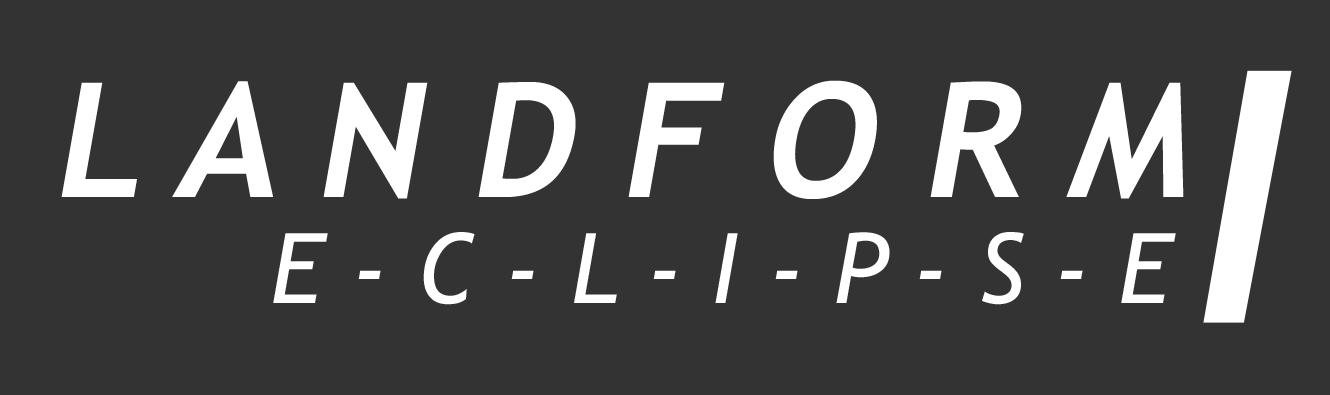
<style>
.page{position:relative;width:1330px;height:395px;background:#333333}
.page>*{position:absolute;margin:0}
.t1{font:159.6px "TrebuchetMS-Bold";color:#ffffff;font-style:italic}
.t2{font:97.5px "TrebuchetMS-Italic";color:#ffffff}
</style>
<div class="page">
<p class="t1" style="left:61px;top:80px;width:1123px;height:119px">L A N D F O R M</p>
<p class="t2" style="left:273px;top:232px;width:903px;height:73px">E - C - L - I - P - S - E</p>
</div>
